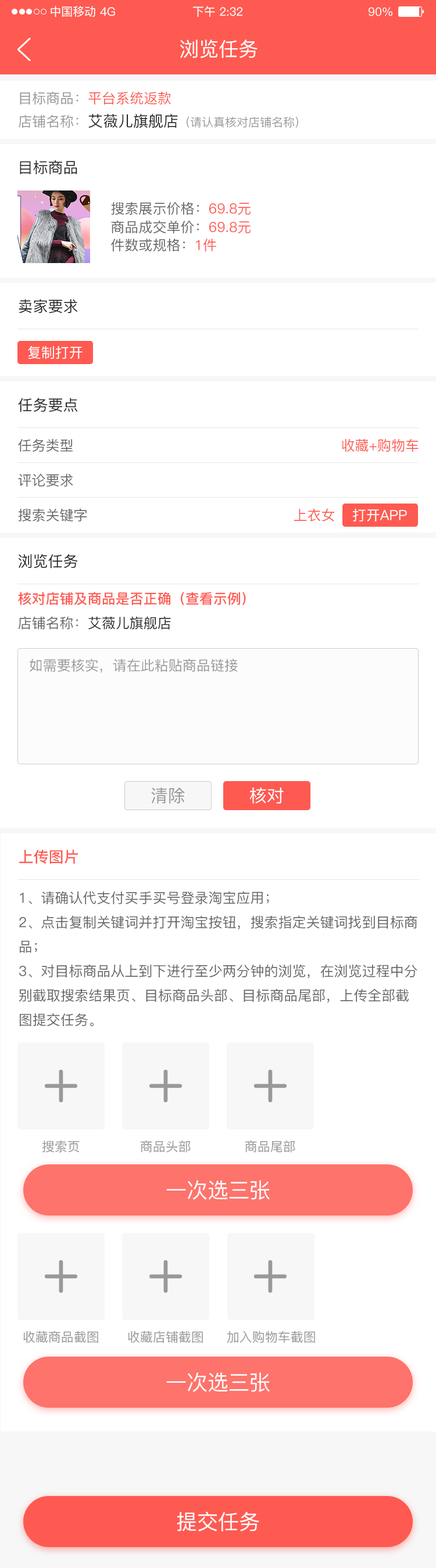
<style>
.page{position:relative;width:436px;height:1568px;background:#ffffff}
.page>*{position:absolute;margin:0}
.t1{font:11.6px "PingFang-SC-Medium";color:#ffffff}
.t2{font:19.7px "PingFang-SC-Medium";color:#ffffff}
.t3{font:13.9px "PingFang-SC-Medium";color:#fe5a51}
.t4{font:13.9px "PingFang-SC-Medium";color:#999999}
.t5{font:11.6px "PingFang-SC-Medium";color:#999999}
.t6{font:15.1px "PingFang-SC-Medium";color:#262626}
.t7{font:13.9px "PingFang-SC-Medium";color:#666666}
.t8{font:13.9px "PingFang-SC-Medium";color:#ffffff}
.t9{font:13.9px "PingFang-SC-Bold";color:#fe5a51}
.t10{font:13.9px "PingFang-SC-Medium";color:#262626}
.t11{font:17.4px "PingFang-SC-Medium";color:#999999}
.t12{font:17.4px "PingFang-SC-Medium";color:#ffffff}
.t13{font:15.1px "PingFang-SC-Bold";color:#fe5a51}
.t14{font:12.8px "PingFang-SC-Medium";color:#999999}
.t15{font:20.9px "PingFang-SC-Medium";color:#ffffff}
</style>
<div class="page">
<p class="t1" style="left:51px;top:6px;width:44px;height:11px">中国移动</p>
<p class="t1" style="left:192px;top:6px;width:51px;height:11px">下午 2:32</p>
<p class="t1" style="left:100px;top:7px;width:15px;height:9px">4G</p>
<p class="t1" style="left:368px;top:7px;width:24px;height:9px">90%</p>
<p class="t2" style="left:179px;top:39px;width:78px;height:19px">浏览任务</p>
<p class="t3" style="left:20px;top:91px;width:151px;height:14px"><span class="t4">目标商品：</span>平台系统返款</p>
<p class="t5" style="left:19px;top:114px;width:279px;height:14px"><span class="t4">店铺名称：</span><span class="t6">艾薇儿旗舰店</span>（请认真核对店铺名称）</p>
<p class="t6" style="left:20px;top:160px;width:57px;height:14px">目标商品</p>
<p class="t7" style="left:111px;top:202px;width:139px;height:13px">搜索展示价格：<span class="t3">69.8元</span></p>
<p class="t7" style="left:111px;top:220px;width:139px;height:13px">商品成交单价：<span class="t3">69.8元</span></p>
<p class="t7" style="left:111px;top:238px;width:105px;height:13px">件数或规格：<span class="t3">1件</span></p>
<p class="t6" style="left:19px;top:299px;width:59px;height:15px">卖家要求</p>
<p class="t8" style="left:28px;top:346px;width:54px;height:13px">复制打开</p>
<p class="t6" style="left:18px;top:398px;width:60px;height:14px">任务要点</p>
<p class="t7" style="left:18px;top:438px;width:55px;height:14px">任务类型</p>
<p class="t3" style="left:341px;top:438px;width:77px;height:14px">收藏+购物车</p>
<p class="t7" style="left:18px;top:473px;width:55px;height:14px">评论要求</p>
<p class="t7" style="left:18px;top:508px;width:69px;height:14px">搜索关键字</p>
<p class="t3" style="left:293px;top:508px;width:42px;height:14px">上衣女</p>
<p class="t8" style="left:352px;top:509px;width:55px;height:13px">打开APP</p>
<p class="t6" style="left:18px;top:554px;width:60px;height:15px">浏览任务</p>
<p class="t9" style="left:18px;top:592px;width:228px;height:13px">核对店铺及商品是否正确（查看示例）</p>
<p class="t10" style="left:18px;top:616px;width:153px;height:14px"><span class="t7">店铺名称：</span>艾薇儿旗舰店</p>
<p class="t4" style="left:30px;top:659px;width:208px;height:14px">如需要核实，请在此粘贴商品链接</p>
<p class="t11" style="left:151px;top:787px;width:34px;height:17px">清除</p>
<p class="t12" style="left:250px;top:787px;width:33px;height:17px">核对</p>
<p class="t13" style="left:19px;top:850px;width:59px;height:14px">上传图片</p>
<p class="t7" style="left:19px;top:891px;width:398px;height:135px">1、请确认代支付买手买号登录淘宝应用；<br>2、点击复制关键词并打开淘宝按钮，搜索指定关键词找到目标商品；<br>3、对目标商品从上到下进行至少两分钟的浏览，在浏览过程中分别截取搜索结果页、目标商品头部、目标商品尾部，上传全部截图提交任务。</p>
<p class="t14" style="left:42px;top:1140px;width:38px;height:13px">搜索页</p>
<p class="t14" style="left:140px;top:1140px;width:50px;height:13px">商品头部</p>
<p class="t14" style="left:244px;top:1140px;width:51px;height:13px">商品尾部</p>
<p class="t15" style="left:166px;top:1180px;width:103px;height:20px">一次选三张</p>
<p class="t14" style="left:23px;top:1330px;width:75px;height:13px">收藏商品截图</p>
<p class="t14" style="left:128px;top:1330px;width:75px;height:13px">收藏店铺截图</p>
<p class="t14" style="left:226px;top:1330px;width:89px;height:13px">加入购物车截图</p>
<p class="t15" style="left:166px;top:1372px;width:103px;height:20px">一次选三张</p>
<p class="t15" style="left:177px;top:1512px;width:82px;height:19px">提交任务</p>
</div>
